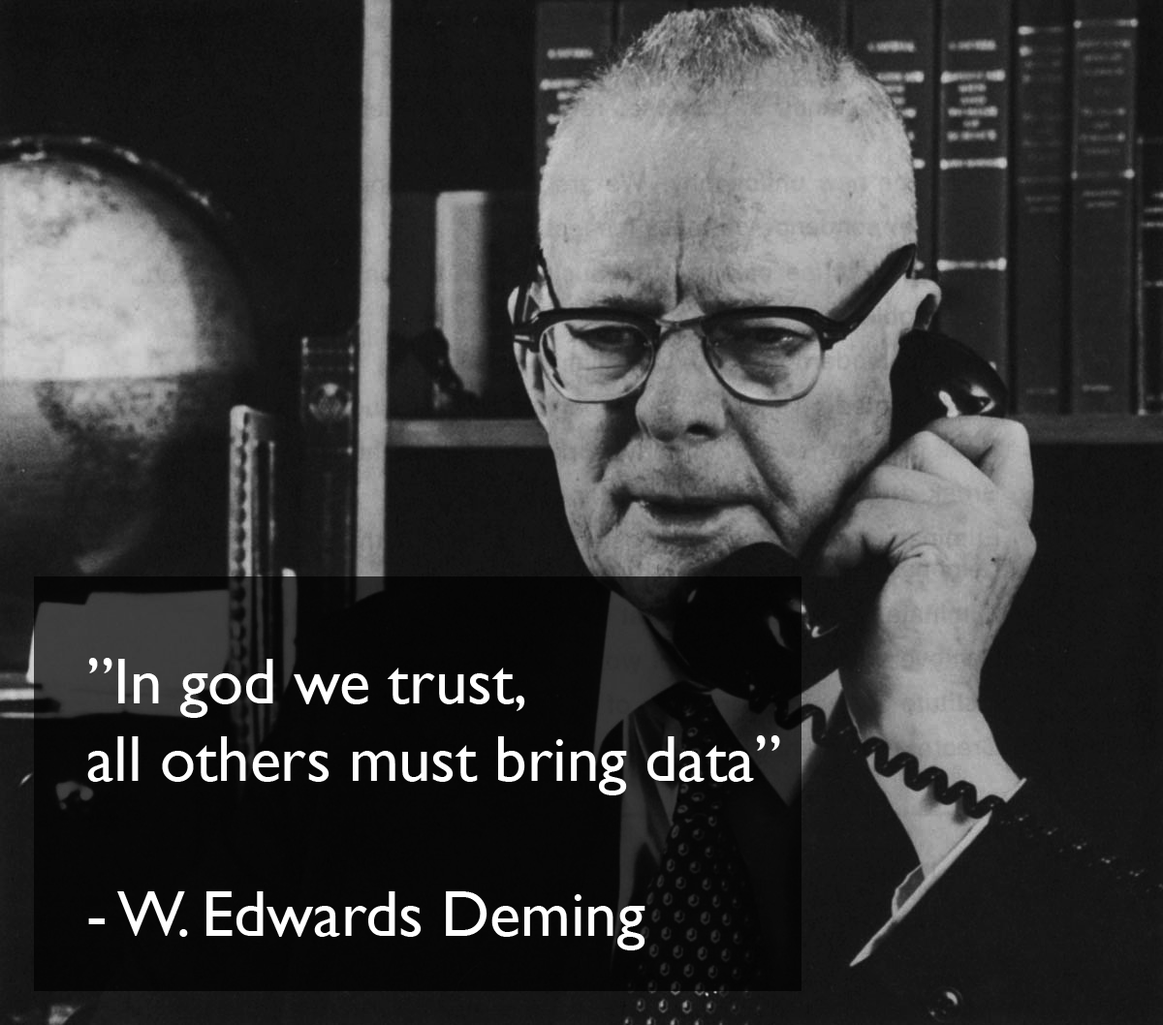
<style>
.page{position:relative;width:1163px;height:1025px}
.page>*{position:absolute;margin:0}
.t1{font:64.6px "GillSans";color:#ffffff}
</style>
<div class="page">
<p class="t1" style="left:87px;top:658px;width:693px;height:293px">”In god we trust, <br>all others must bring data”<br><br>- W. Edwards Deming</p>
</div>
